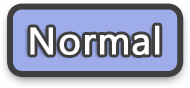
<style>
.page{position:relative;width:190px;height:88px;background:#9eade9}
.page>*{position:absolute;margin:0}
.t1{font:38px "MicrosoftPhagsPa";letter-spacing:0.02em;color:#ffffff;font-weight:bold}
</style>
<div class="page">
<p class="t1" style="left:30px;top:25px;width:130px;height:30px">Normal</p>
</div>
